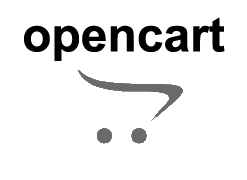
<style>
.page{position:relative;width:247px;height:180px;background:#ffffff}
.page>*{position:absolute;margin:0}
.t1{font:48px "Arial-BoldMT";color:#000000}
</style>
<div class="page">
<p class="t1" style="left:24px;top:17px;width:201px;height:44px">opencart</p>
</div>
